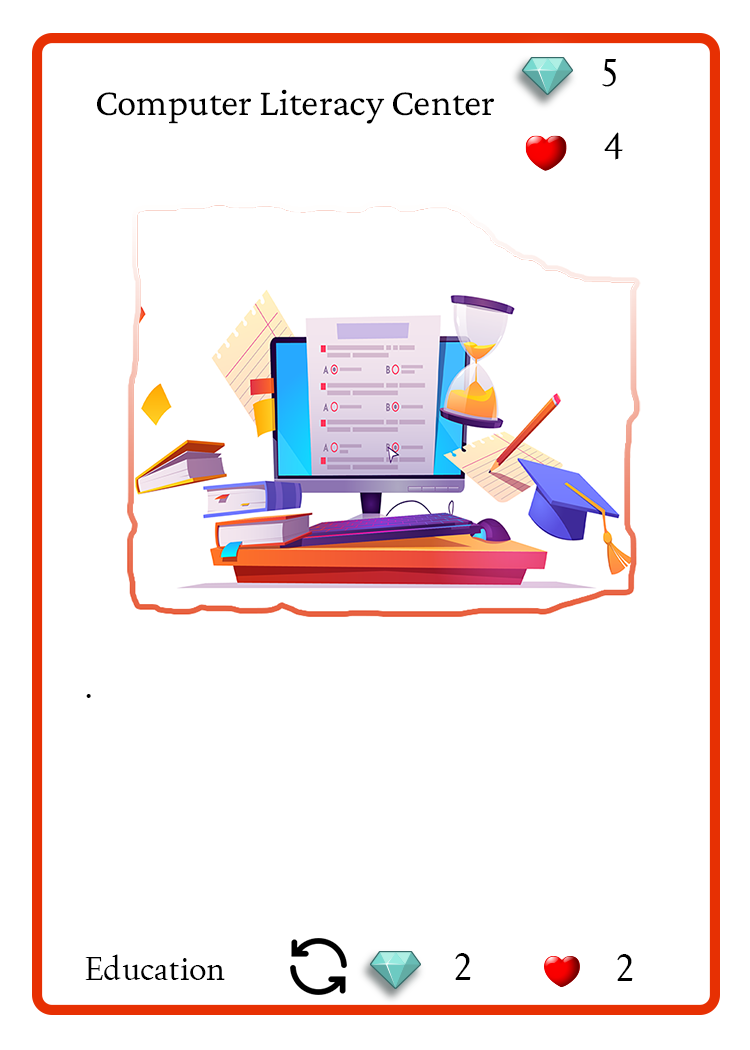
<style>
.page{position:relative;width:750px;height:1050px;background:#ffffff}
.page>*{position:absolute;margin:0}
.t1{font:37.5px "Joan-Regular";color:#000000;text-transform:uppercase}
.t2{font:38.9px "CrimsonPro-Regular";color:#000000}
.t3{font:33.3px "Joan-Regular";color:#000000}
</style>
<div class="page">
<p class="t1" style="left:602px;top:59px;width:14px;height:28px">5</p>
<p class="t2" style="left:97px;top:89px;width:397px;height:35px">Computer Literacy Center</p>
<p class="t1" style="left:604px;top:132px;width:19px;height:28px">4</p>
<p class="t3" style="left:86px;top:694px;width:5px;height:4px">.</p>
<p class="t1" style="left:455px;top:953px;width:16px;height:27px">2</p>
<p class="t3" style="left:85px;top:954px;width:140px;height:26px">Education</p>
<p class="t1" style="left:617px;top:954px;width:16px;height:27px">2</p>
</div>
